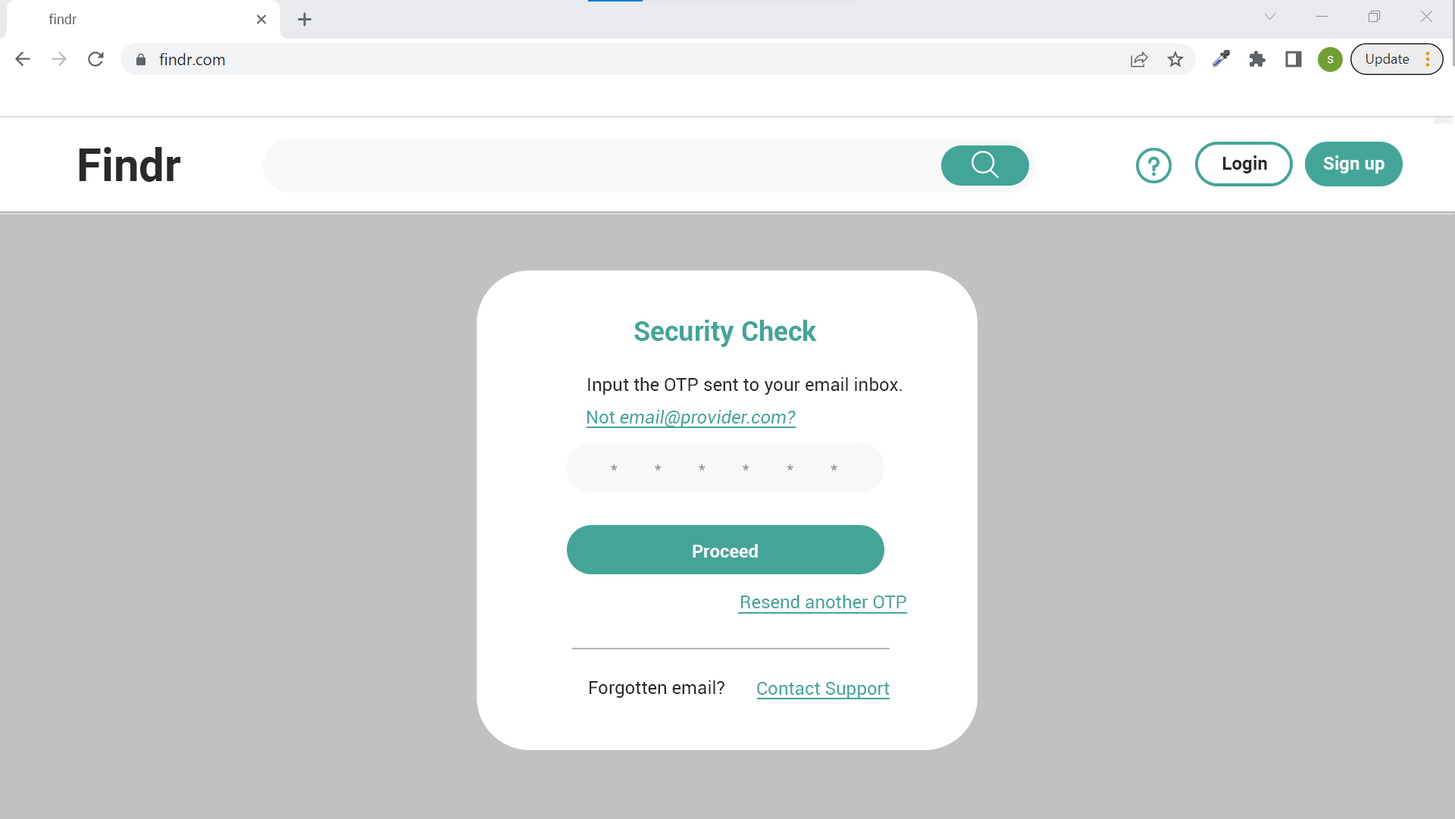
<style>
.page{position:relative;width:1455px;height:819px;background:#c1c1c1}
.page>*{position:absolute;margin:0}
.t1{font:13.6px "Roboto-Regular";color:#5f5f5f}
.t2{font:45.5px "Roboto-Bold";color:#2a2a2a}
.t3{font:18.2px "Roboto-Bold";color:#2a2a2a}
.t4{font:18.2px "Roboto-Bold";color:#ffffff}
.t5{font:27.3px "Roboto-Bold";color:#42a598}
.t6{font:18.2px "Roboto-Regular";color:#2a2a2a}
.t7{font:18.2px "Roboto-Italic";color:#42a598}
.t8{font:18.2px "Roboto-Regular";color:#42a598}
.t9{font:18.2px "Roboto-Regular";color:#989898}
</style>
<div class="page">
<p class="t1" style="left:49px;top:14px;width:28px;height:10px">findr</p>
<p class="t2" style="left:79px;top:147px;width:102px;height:35px">Findr</p>
<p class="t3" style="left:1223px;top:155px;width:44px;height:19px">Login</p>
<p class="t4" style="left:1323px;top:155px;width:62px;height:19px">Sign up</p>
<p class="t5" style="left:634px;top:320px;width:183px;height:27px">Security Check</p>
<p class="t6" style="left:588px;top:377px;width:314px;height:18px">Input the OTP sent to your email inbox.</p>
<p class="t7" style="left:587px;top:410px;width:209px;height:17px"><span class="t8">Not </span>email@provider.com?</p>
<p class="t9" style="left:611px;top:465px;width:227px;height:6px">*        *        *        *        *        *</p>
<p class="t4" style="left:693px;top:544px;width:65px;height:14px">Proceed</p>
<p class="t8" style="left:741px;top:595px;width:166px;height:14px">Resend another OTP</p>
<p class="t6" style="left:590px;top:681px;width:135px;height:17px">Forgotten email?</p>
<p class="t8" style="left:757px;top:682px;width:133px;height:17px">Contact Support</p>
</div>
